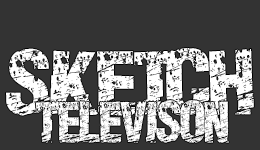
<style>
.page{position:relative;width:260px;height:150px;background:#333333}
.page>*{position:absolute;margin:0}
.t1{font:65.3px "PaintScratch";color:#ffffff;scale:0.73 1}
.t2{font:41.2px "PaintScratch";color:#ffffff;scale:0.65 1}
</style>
<div class="page">
<p class="t1" style="left:6px;top:48px;width:248px;height:68px">SKETCH</p>
<p class="t2" style="left:35px;top:100px;width:194px;height:43px">TELEVISON</p>
</div>
